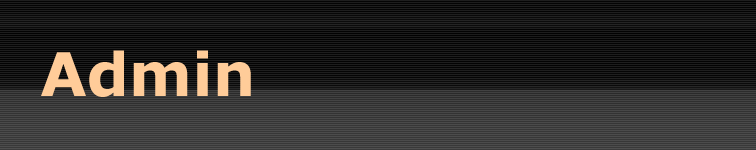
<style>
.page{position:relative;width:756px;height:150px}
.page>*{position:absolute;margin:0}
.t1{font:60px "Verdana-Bold";color:#ffcc99}
</style>
<div class="page">
<p class="t1" style="left:41px;top:50px;width:210px;height:47px">Admin</p>
</div>
